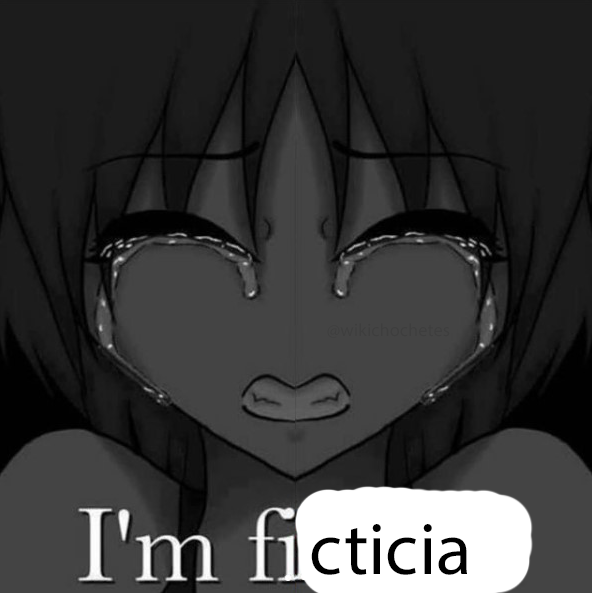
<style>
.page{position:relative;width:592px;height:593px}
.page>*{position:absolute;margin:0}
.t1{font:18.1px "MyriadPro-Regular";color:#3e3e3e}
.t2{font:74px "MyriadPro-Regular";color:#000000}
</style>
<div class="page">
<p class="t1" style="left:327px;top:323px;width:123px;height:15px">@wikichochetes</p>
<p class="t2" style="left:311px;top:524px;width:156px;height:51px">cticia</p>
</div>
